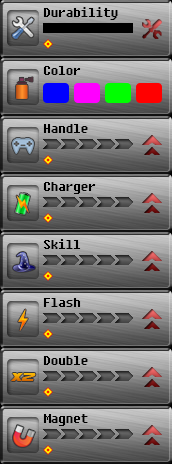
<style>
.page{position:relative;width:172px;height:464px}
.page>*{position:absolute;margin:0}
.t1{font:12px "Fixedsys";color:#000000}
.t2{font:12px "DreamMMA"}
</style>
<div class="page">
<p class="t1" style="left:43px;top:7px;width:75px;height:13px">Durability</p>
<p class="t1" style="left:43px;top:66px;width:38px;height:9px">Color</p>
<p class="t1" style="left:43px;top:124px;width:45px;height:9px">Handle</p>
<p class="t1" style="left:43px;top:182px;width:53px;height:12px">Charger</p>
<p class="t1" style="left:43px;top:239px;width:38px;height:10px">Skill</p>
<p class="t1" style="left:43px;top:298px;width:38px;height:9px">Flash</p>
<p class="t1" style="left:43px;top:356px;width:45px;height:9px">Double</p>
<p class="t2" style="left:11px;top:373px;width:25px;height:8px">x2</p>
<p class="t1" style="left:43px;top:414px;width:45px;height:12px">Magnet</p>
</div>
